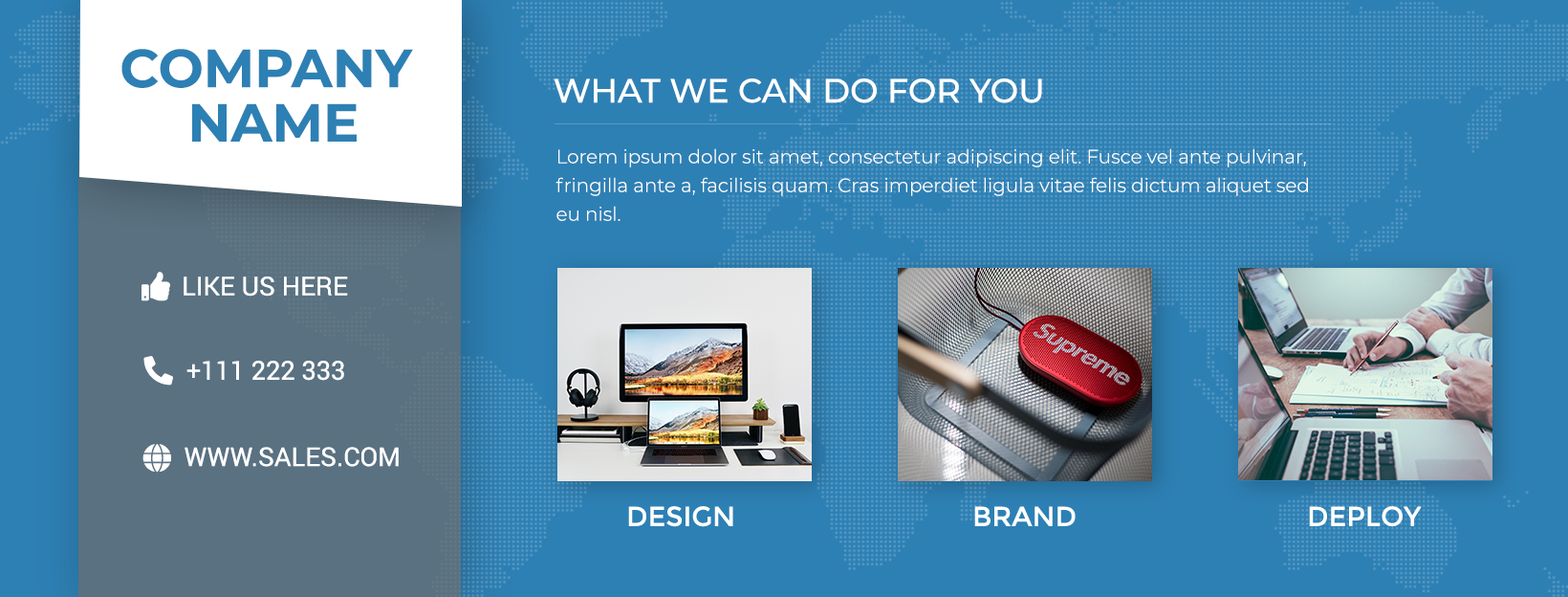
<style>
.page{position:relative;width:1568px;height:597px;background:#2d80b4}
.page>*{position:absolute;margin:0}
.t1{font:53.5px/54.3px "Montserrat-Bold";color:#2d80b4;text-transform:uppercase}
.t2{font:33.5px "Montserrat-Medium";color:#ffffff;text-transform:uppercase}
.t3{font:19.1px/28.7px "Montserrat-Light";color:#ffffff}
.t4{font:26px "Roboto-Regular";color:#ffffff;text-transform:uppercase}
.t5{font:27.5px "Montserrat-Regular";color:#ffffff;text-transform:uppercase}
</style>
<div class="page">
<p class="t1" style="left:121px;top:49px;width:292px;height:93px;text-align:center">company <br>name</p>
<p class="t2" style="left:554px;top:78px;width:488px;height:25px">what we can do for you</p>
<p class="t3" style="left:555px;top:148px;width:753px;height:73px">Lorem ipsum dolor sit amet, consectetur adipiscing elit. Fusce vel ante pulvinar, fringilla ante a, facilisis quam. Cras imperdiet ligula vitae felis dictum aliquet sed eu nisl.</p>
<p class="t4" style="left:184px;top:276px;width:164px;height:20px">Like US HERE</p>
<p class="t4" style="left:186px;top:360px;width:158px;height:21px">+111 222 333</p>
<p class="t4" style="left:185px;top:446px;width:214px;height:21px">www.sales.com</p>
<p class="t5" style="left:628px;top:506px;width:105px;height:21px">dESIGN</p>
<p class="t5" style="left:974px;top:506px;width:102px;height:20px">BRAND</p>
<p class="t5" style="left:1309px;top:506px;width:113px;height:21px">DEPLOY</p>
</div>
